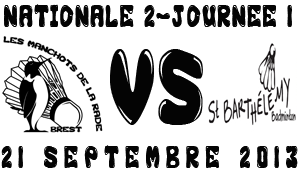
<style>
.page{position:relative;width:300px;height:171px;background:#ffffff}
.page>*{position:absolute;margin:0}
.t1{font:28px "GFS-Custom-Bubble1";letter-spacing:0.15em;color:#040404;scale:0.5 1}
.t2{font:96px "GFS-Custom-Bubble1";letter-spacing:0.08em;color:#040404;scale:0.5 1}
.t3{font:28px "GFS-Custom-Bubble1";letter-spacing:0.5em;color:#040404;scale:0.5 1}
</style>
<div class="page">
<p class="t1" style="left:4px;top:4px;width:288px;height:23px">NATIONALE 2-JOURNEE 1</p>
<p class="t2" style="left:110px;top:49px;width:93px;height:76px">VS</p>
<p class="t3" style="left:1px;top:145px;width:297px;height:23px">21 SEPTEMBRE 2013</p>
</div>
